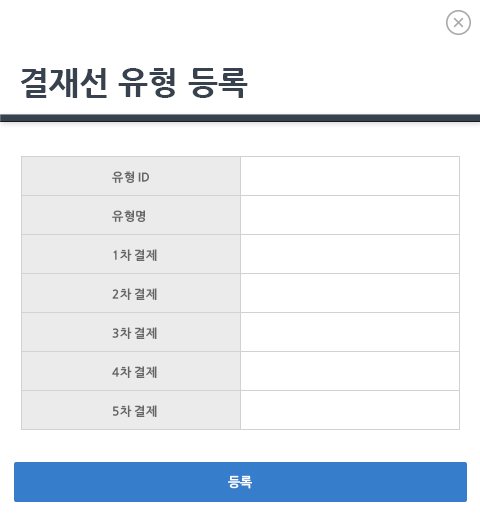
<style>
.page{position:relative;width:480px;height:520px;background:#ffffff}
.page>*{position:absolute;margin:0}
.t1{font:32px "NanumGothicExtraBold";color:#38424e}
.t2{font:12px "NanumGothicOTFBold";color:#666666}
.t3{font:13px "NanumGothicOTFBold";letter-spacing:-0.025em;color:#ffffff}
</style>
<div class="page">
<p class="t1" style="left:21px;top:68px;width:227px;height:30px">결재선 유형 등록</p>
<p class="t2" style="left:112px;top:171px;width:37px;height:12px">유형 ID</p>
<p class="t2" style="left:112px;top:210px;width:34px;height:12px">유형명</p>
<p class="t2" style="left:113px;top:249px;width:44px;height:12px">1차 결제</p>
<p class="t2" style="left:112px;top:288px;width:45px;height:12px">2차 결제</p>
<p class="t2" style="left:112px;top:327px;width:45px;height:12px">3차 결제</p>
<p class="t2" style="left:112px;top:366px;width:45px;height:12px">4차 결제</p>
<p class="t2" style="left:113px;top:405px;width:44px;height:12px">5차 결제</p>
<p class="t3" style="left:228px;top:475px;width:24px;height:14px">등록</p>
</div>
